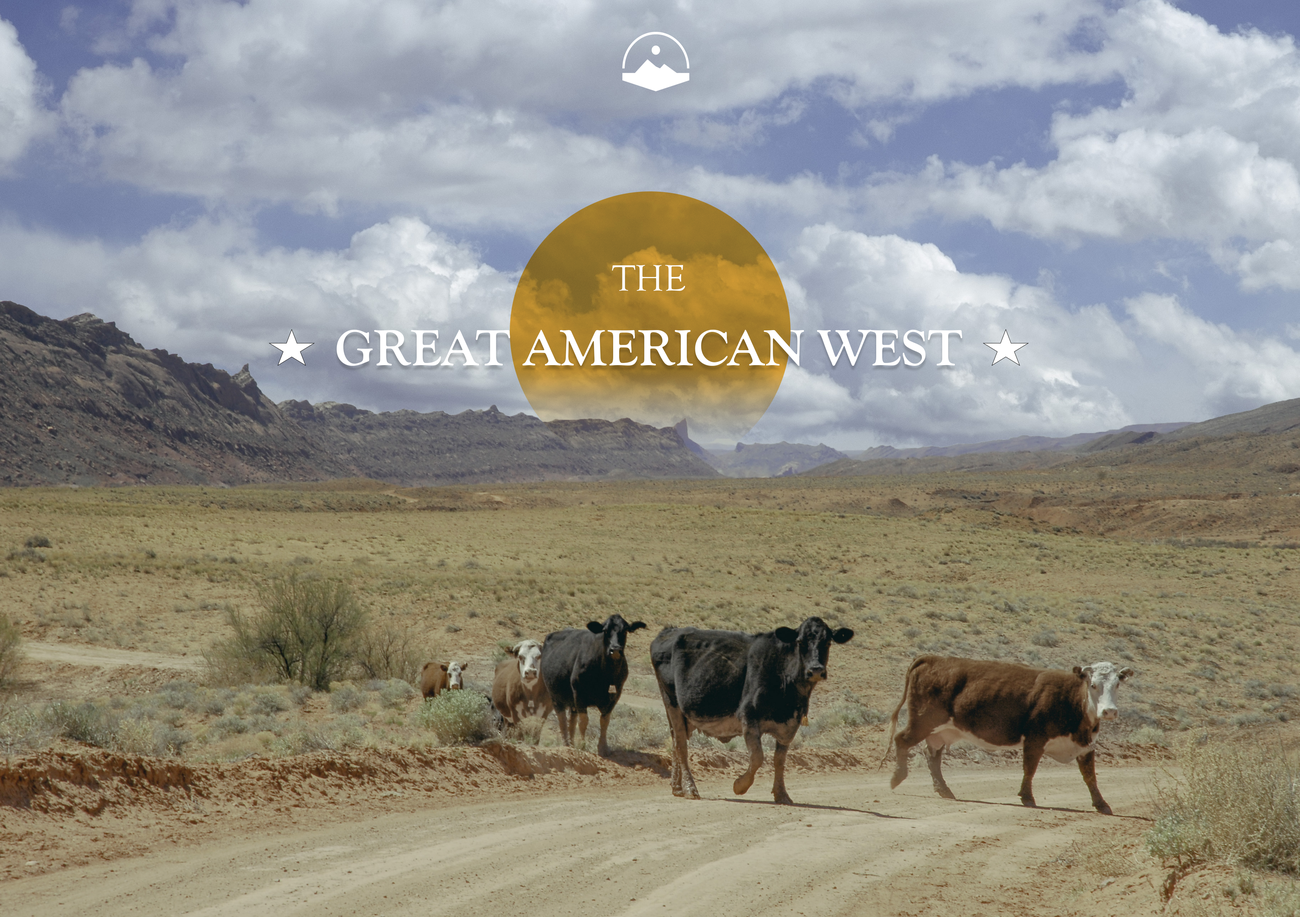
<style>
.page{position:relative;width:1300px;height:917px}
.page>*{position:absolute;margin:0}
.t1{font:37.8px "GoudyOldStyleT-Regular";color:#ffffff}
.t2{font:53px "GoudyOldStyleT-Bold";color:#ffffff}
</style>
<div class="page">
<p class="t1" style="left:612px;top:265px;width:73px;height:26px">THE</p>
<p class="t2" style="left:337px;top:330px;width:625px;height:36px">GREAT AMERICAN WEST</p>
</div>
